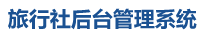
<style>
.page{position:relative;width:200px;height:37px;background:#ffffff}
.page>*{position:absolute;margin:0}
.t1{font:21px "MicrosoftYaHeiUI-Bold";color:#1a5192}
</style>
<div class="page">
<p class="t1" style="left:8px;top:8px;width:189px;height:22px">旅行社后台管理系统</p>
</div>
